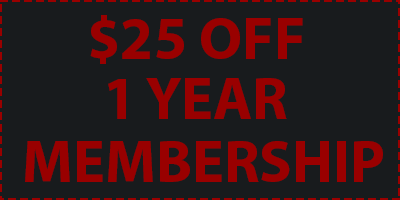
<style>
.page{position:relative;width:400px;height:200px;background:#181b1d}
.page>*{position:absolute;margin:0}
.t1{font:60px "MyriadPro-Bold";color:#990000}
</style>
<div class="page">
<p class="t1" style="left:90px;top:15px;width:213px;height:49px">$25 OFF</p>
<p class="t1" style="left:108px;top:78px;width:179px;height:41px">1 YEAR</p>
<p class="t1" style="left:25px;top:141px;width:358px;height:41px">MEMBERSHIP</p>
</div>
